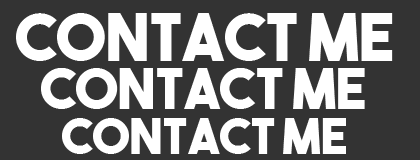
<style>
.page{position:relative;width:420px;height:160px;background:#333333}
.page>*{position:absolute;margin:0}
.t1{font:65.5px "TheBoldFont";color:#ffffff}
.t2{font:56.4px "TheBoldFont";color:#ffffff}
.t3{font:49.4px "TheBoldFont";color:#ffffff}
</style>
<div class="page">
<p class="t1" style="left:16px;top:13px;width:377px;height:48px">Contact Me</p>
<p class="t2" style="left:41px;top:68px;width:324px;height:41px">Contact me</p>
<p class="t3" style="left:62px;top:118px;width:284px;height:36px">Contact me</p>
</div>
